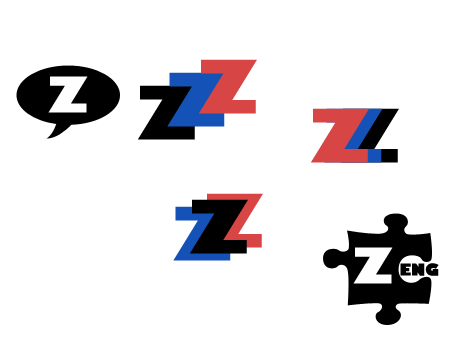
<style>
.page{position:relative;width:454px;height:340px;background:#ffffff}
.page>*{position:absolute;margin:0}
.t1{font:72px "GillSans-UltraBold";color:#d84545}
.t2{font:48px "GillSans-UltraBold";color:#fefefe}
.t3{font:72px "GillSans-UltraBold";color:#1552b7}
.t4{font:72px "GillSans-UltraBold";color:#000000}
.t5{font:72px "GillSans-UltraBold"}
.t6{font:16px "GillSans-UltraBold";color:#010101}
</style>
<div class="page">
<p class="t1" style="left:199px;top:59px;width:58px;height:55px">Z</p>
<p class="t2" style="left:48px;top:76px;width:40px;height:37px">Z</p>
<p class="t3" style="left:167px;top:72px;width:59px;height:55px">Z</p>
<p class="t4" style="left:138px;top:85px;width:58px;height:55px">Z</p>
<p class="t1" style="left:311px;top:108px;width:58px;height:55px">Z</p>
<p class="t5" style="left:341px;top:108px;width:58px;height:55px">Z</p>
<p class="t5" style="left:205px;top:193px;width:58px;height:55px">Z</p>
<p class="t5" style="left:173px;top:206px;width:59px;height:55px">Z</p>
<p class="t4" style="left:190px;top:199px;width:58px;height:55px">Z</p>
<p class="t2" style="left:353px;top:247px;width:40px;height:37px">Z</p>
<p class="t6" style="left:400px;top:263px;width:39px;height:13px">ENG</p>
</div>
